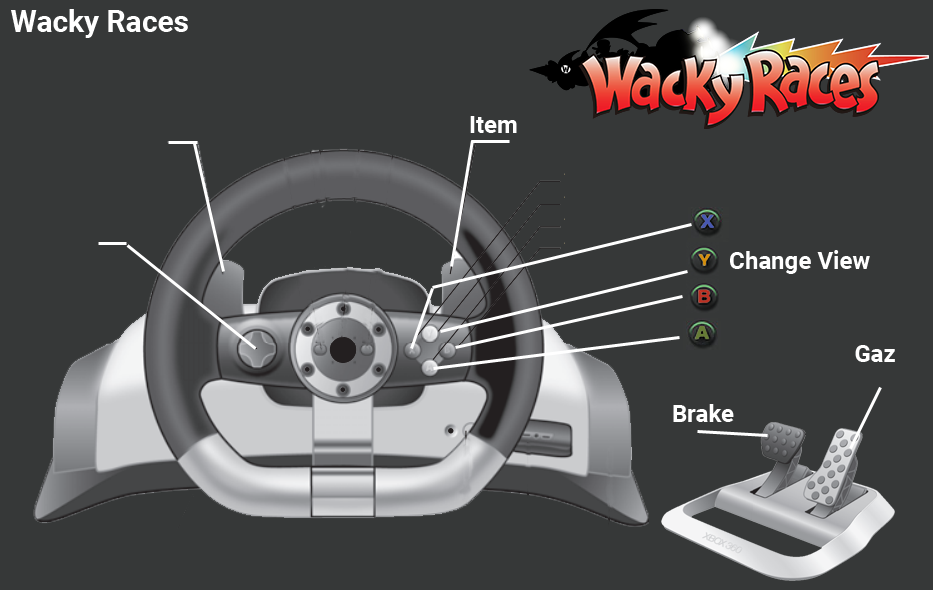
<style>
.page{position:relative;width:933px;height:590px;background:#363838}
.page>*{position:absolute;margin:0}
.t1{font:30px "Roboto-Bold";color:#ffffff}
.t2{font:24px "Roboto-Bold";color:#ffffff}
</style>
<div class="page">
<p class="t1" style="left:11px;top:9px;width:177px;height:29px">Wacky Races</p>
<p class="t2" style="left:470px;top:116px;width:47px;height:17px">Item</p>
<p class="t2" style="left:730px;top:250px;width:140px;height:24px">Change View</p>
<p class="t2" style="left:855px;top:345px;width:40px;height:17px">Gaz</p>
<p class="t2" style="left:673px;top:404px;width:61px;height:18px">Brake</p>
</div>
